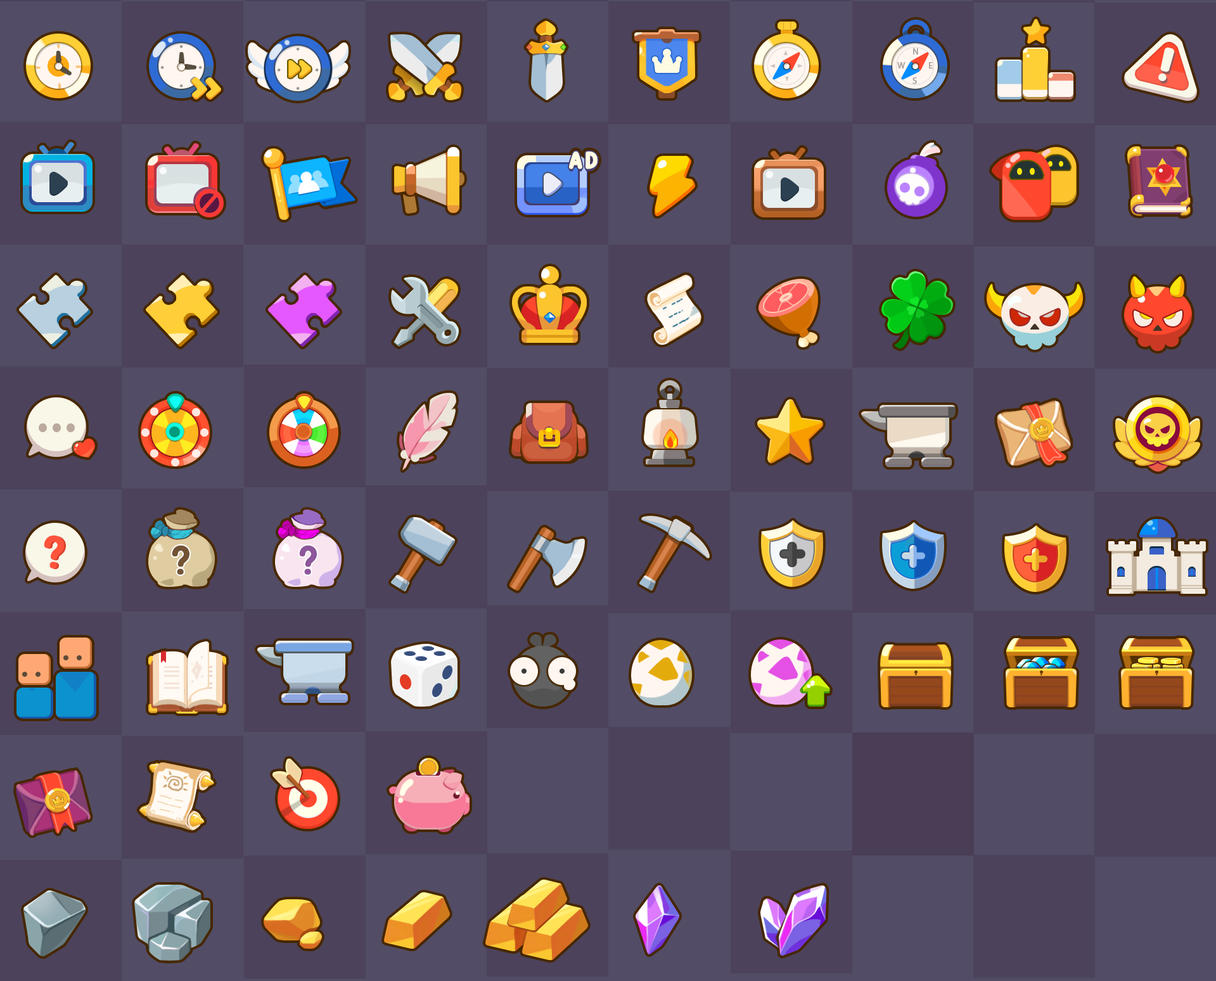
<style>
.page{position:relative;width:1216px;height:981px;background:#524c66}
.page>*{position:absolute;margin:0}
.t1{font:9px "MyriadPro-Regular";letter-spacing:0.06em;color:#a9a39f;font-weight:bold}
.t2{font:24.3px "CandyBeans";letter-spacing:0.08em;color:#fffbe2;font-weight:bold}
.t3{font:46.2px "FS-North-Land-Sans";letter-spacing:0.06em;color:#ff543c;font-weight:bold}
.t4{font:41.1px "FS-North-Land-Sans";letter-spacing:0.06em;color:#725334;font-weight:bold}
.t5{font:41.1px "FS-North-Land-Sans";letter-spacing:0.06em;color:#8e569c;font-weight:bold}
</style>
<div class="page">
<p class="t1" style="left:913px;top:48px;width:5px;height:7px">N</p>
<p class="t1" style="left:897px;top:62px;width:8px;height:7px">W</p>
<p class="t1" style="left:929px;top:62px;width:4px;height:7px">E</p>
<p class="t1" style="left:912px;top:77px;width:5px;height:7px">S</p>
<p class="t2" style="left:569px;top:151px;width:28px;height:18px">AD</p>
<p class="t3" style="left:44px;top:535px;width:20px;height:33px">?</p>
<p class="t3" style="left:46px;top:536px;width:20px;height:33px">?</p>
<p class="t4" style="left:172px;top:545px;width:17px;height:30px">?</p>
<p class="t5" style="left:299px;top:545px;width:18px;height:30px">?</p>
</div>
